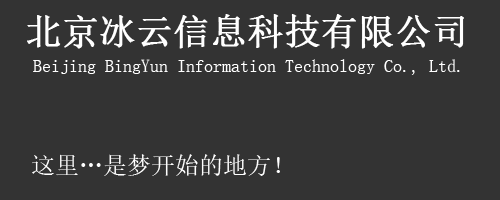
<style>
.page{position:relative;width:500px;height:200px;background:#333333}
.page>*{position:absolute;margin:0}
.t1{font:36px "SimSun";color:#ffffff;font-weight:bold}
.t2{font:18px "SimSun";color:#ffffff}
.t3{font:24px "SimSun";color:#ffffff}
</style>
<div class="page">
<p class="t1" style="left:27px;top:14px;width:437px;height:35px">北京冰云信息科技有限公司</p>
<p class="t2" style="left:33px;top:59px;width:427px;height:16px">Beijing BingYun Information Technology Co., Ltd.</p>
<p class="t3" style="left:32px;top:154px;width:248px;height:22px">这里…是梦开始的地方！</p>
</div>
